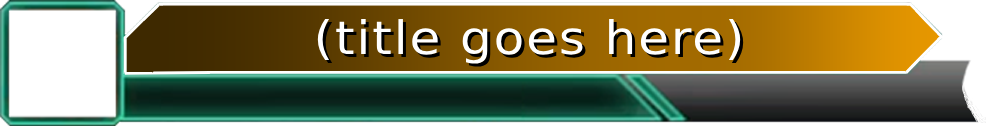
<style>
.page{position:relative;width:986px;height:126px;background:#ffffff}
.page>*{position:absolute;margin:0}
.t1{font:46px "DejaVuSans";letter-spacing:0.04em;color:#ffffff;scale:1.09 1}
</style>
<div class="page">
<p class="t1" style="left:317px;top:19px;width:424px;height:45px">(title goes here)</p>
</div>
